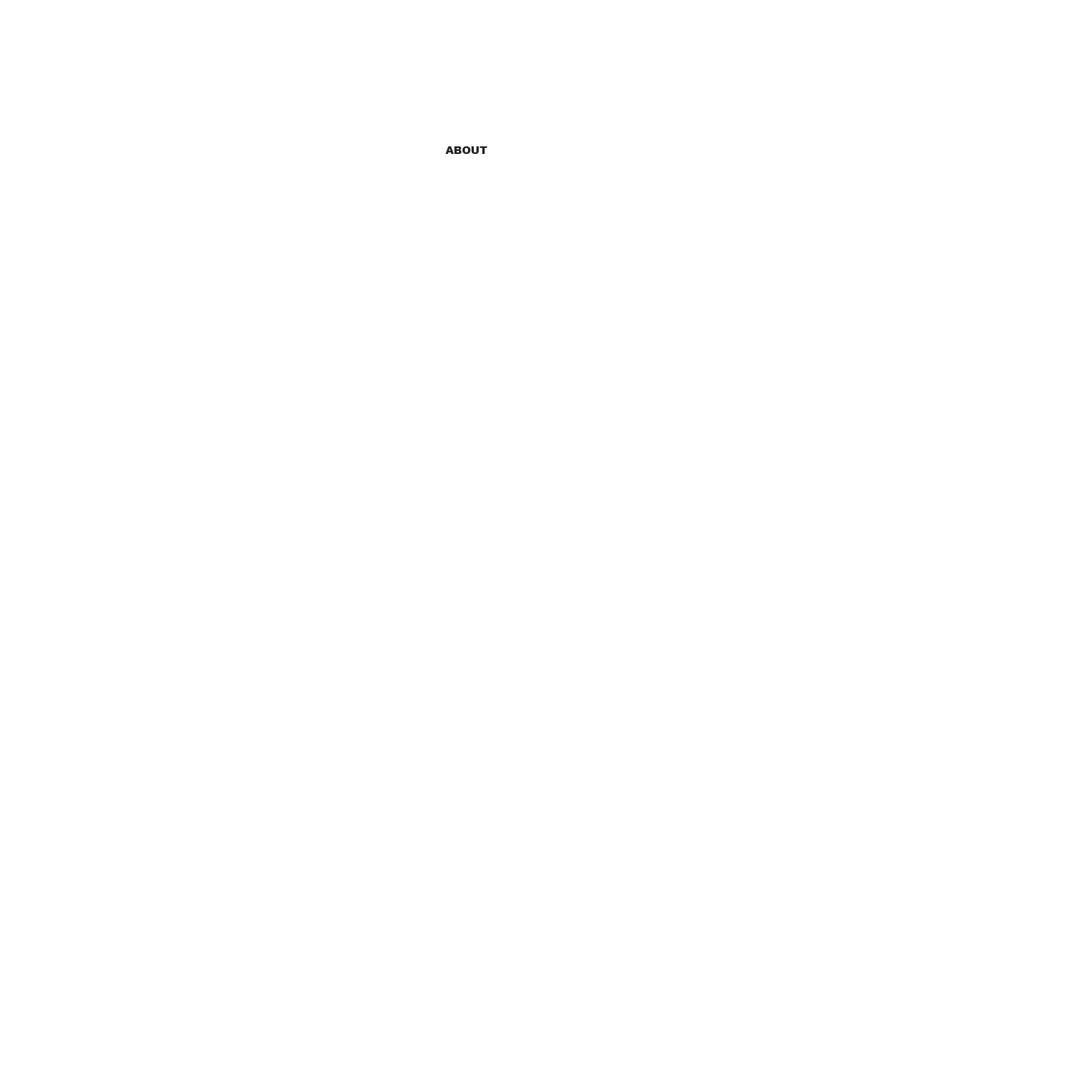
<style>
.page{position:relative;width:1092px;height:1092px;background:#ffffff}
.page>*{position:absolute;margin:0}
.t1{font:10.6px "Arial-Black";color:#252525}
</style>
<div class="page">
<p class="t1" style="left:445px;top:146px;width:43px;height:8px">ABOUT</p>
</div>
